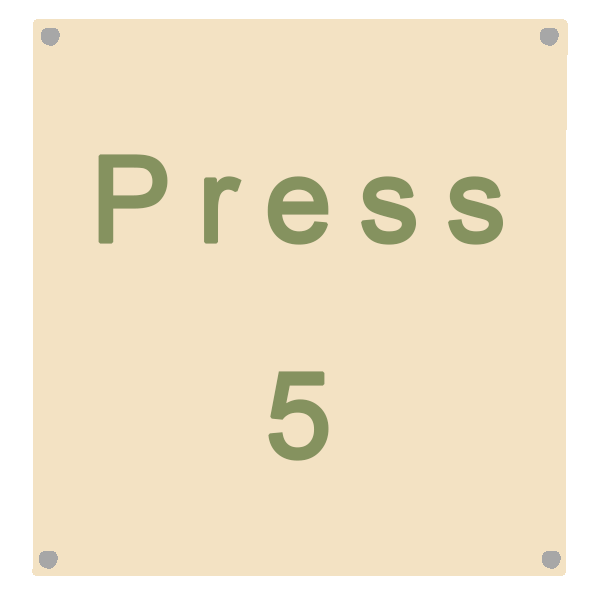
<style>
.page{position:relative;width:600px;height:600px;background:#f3e2c3}
.page>*{position:absolute;margin:0}
.t1{font:120px "ArialMT";letter-spacing:0.2em;color:#85925f;font-weight:bold}
</style>
<div class="page">
<p class="t1" style="left:98px;top:154px;width:406px;height:307px;text-align:center">Press<br> <br>5</p>
</div>
